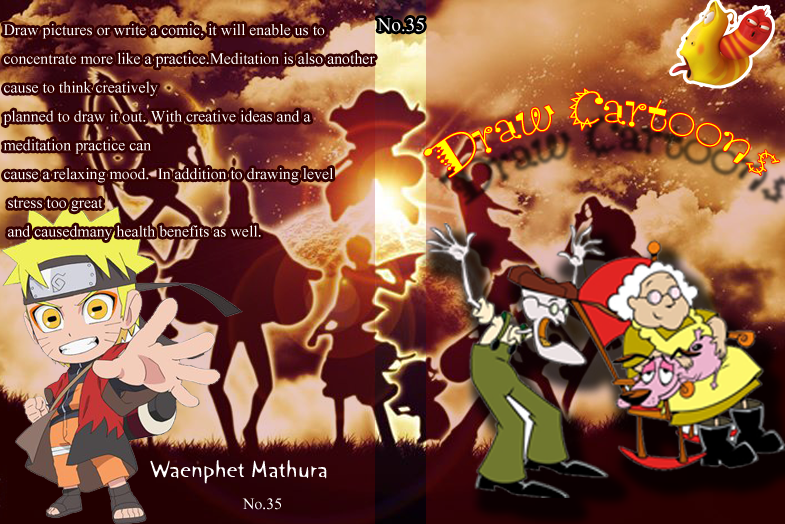
<style>
.page{position:relative;width:785px;height:524px}
.page>*{position:absolute;margin:0}
.t1{font:24px "AngsanaNew";color:#ffffff}
.t2{font:29.1px "AngsanaNew";color:#ffffff}
.t3{font:48px "ScruffLetPlain";color:#ffff00}
.t4{font:24px "OrangeLetPlain";color:#ffffff}
</style>
<div class="page">
<p class="t1" style="left:3px;top:24px;width:372px;height:216px">Draw pictures or write a comic, it will enable us to <br>concentrate more like a practice.Meditation is also another <br>cause to think creatively <br>planned to draw it out. With creative ideas and a <br>meditation practice can <br>cause a relaxing mood.  In addition to drawing level<br> stress too great<br> and causedmany health benefits as well.</p>
<p class="t2" style="left:377px;top:18px;width:47px;height:14px">No.35</p>
<p class="t3" style="left:424px;top:88px;width:356px;height:90px">Draw Cartoons</p>
<p class="t4" style="left:150px;top:460px;width:177px;height:24px">Waenphet Mathura</p>
<p class="t1" style="left:242px;top:498px;width:40px;height:12px">No.35</p>
</div>
